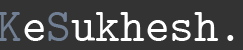
<style>
.page{position:relative;width:243px;height:50px;background:#333333}
.page>*{position:absolute;margin:0}
.t1{font:46.5px "CMUTypewriter-Regular";color:#ffffff}
.t2{font:46.5px "CMUTypewriter-Regular";color:#707f93}
</style>
<div class="page">
<p class="t1" style="left:0px;top:12px;width:234px;height:29px"><span class="t2">K</span>e<span class="t2">S</span>ukhesh.</p>
</div>
